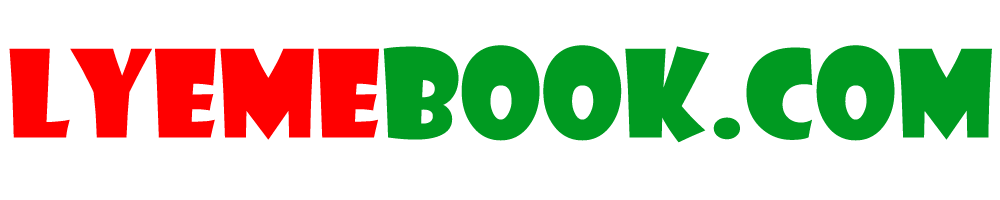
<style>
.page{position:relative;width:1000px;height:200px;background:#ffffff}
.page>*{position:absolute;margin:0}
.t1{font:118px "ShowcardGothic-Reg";color:#009a21;text-transform:uppercase}
.t2{font:118px "ShowcardGothic-Reg";color:#ff0000;text-transform:uppercase}
</style>
<div class="page">
<p class="t1" style="left:9px;top:45px;width:983px;height:98px"><span class="t2">lyeme</span>book.com</p>
</div>
